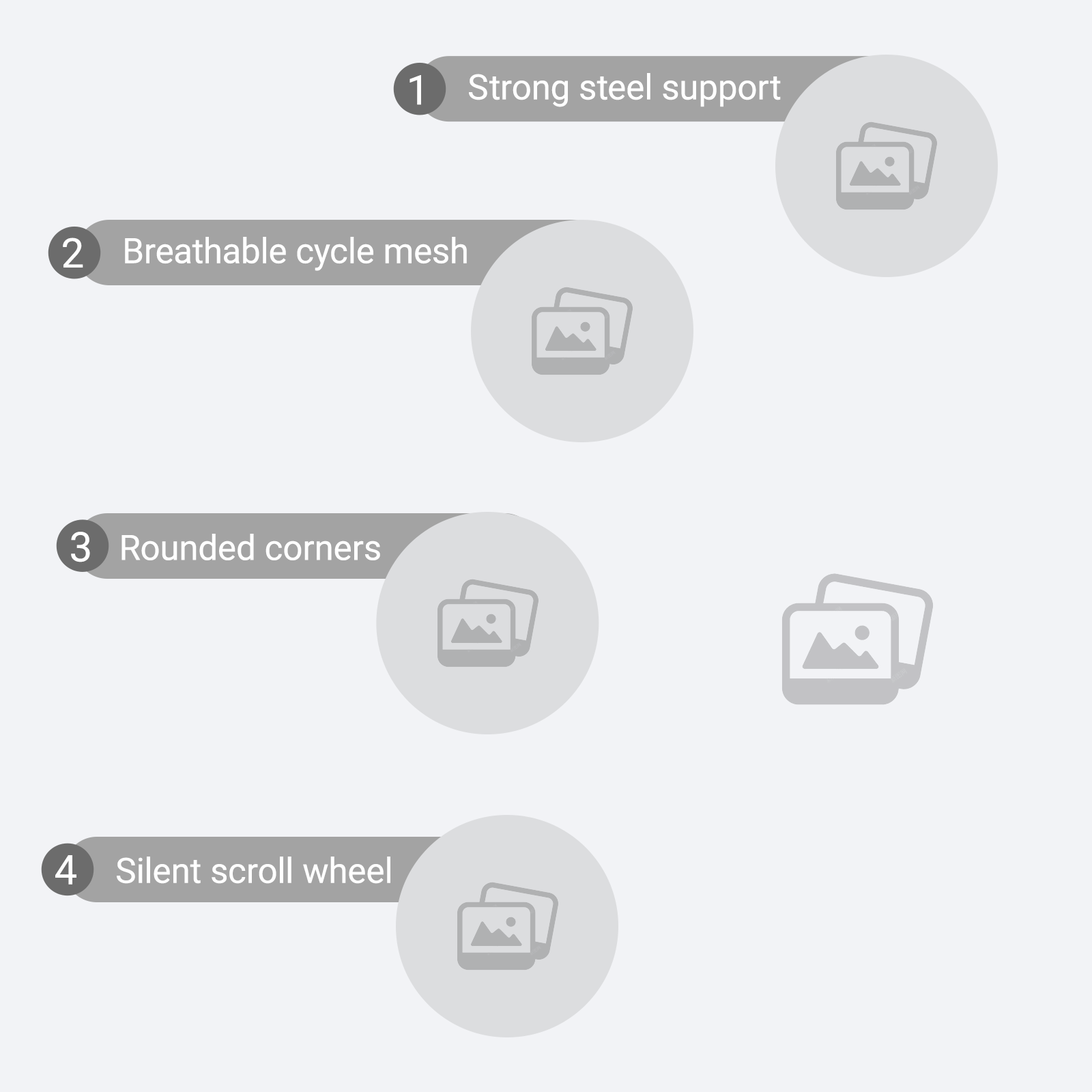
<style>
.page{position:relative;width:1092px;height:1092px;background:#f2f3f6}
.page>*{position:absolute;margin:0}
.t1{font:40.9px "Roboto-Regular";color:#ffffff}
.t2{font:34.9px "Roboto-Regular";color:#ffffff}
</style>
<div class="page">
<p class="t1" style="left:409px;top:75px;width:12px;height:30px">1</p>
<p class="t2" style="left:469px;top:73px;width:312px;height:34px">Strong steel support</p>
<p class="t1" style="left:63px;top:238px;width:20px;height:30px">2</p>
<p class="t2" style="left:125px;top:237px;width:342px;height:34px">Breathable cycle mesh</p>
<p class="t1" style="left:71px;top:532px;width:19px;height:30px">3</p>
<p class="t2" style="left:121px;top:534px;width:259px;height:26px">Rounded corners</p>
<p class="t1" style="left:55px;top:855px;width:21px;height:30px">4</p>
<p class="t2" style="left:117px;top:857px;width:273px;height:27px">Silent scroll wheel</p>
</div>
